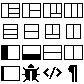
<style>
.page{position:relative;width:84px;height:84px;background:#ffffff}
.page>*{position:absolute;margin:0}
.t1{font:20px "HelveticaNeue-CondensedBold";color:#000000}
</style>
<div class="page">
<p class="t1" style="left:68px;top:65px;width:9px;height:17px">¶</p>
</div>
